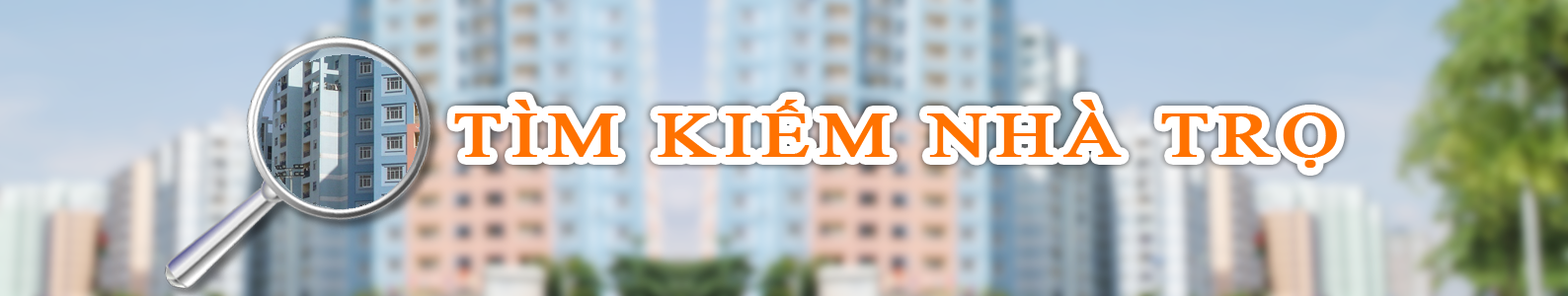
<style>
.page{position:relative;width:1568px;height:296px}
.page>*{position:absolute;margin:0}
.t1{font:63.2px "TimesNewRomanPSMT";letter-spacing:0.1em;color:#ff7200;font-weight:bold;scale:1.25 1}
</style>
<div class="page">
<p class="t1" style="left:454px;top:100px;width:883px;height:68px">TÌM KIẾM NHÀ TRỌ</p>
</div>
